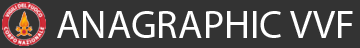
<style>
.page{position:relative;width:360px;height:48px;background:#333333}
.page>*{position:absolute;margin:0}
.t1{font:40px "MyriadPro-Regular";color:#ffffff}
</style>
<div class="page">
<p class="t1" style="left:57px;top:11px;width:296px;height:27px">ANAGRAPHIC VVF</p>
</div>
